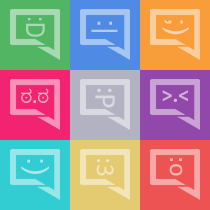
<style>
.page{position:relative;width:210px;height:210px}
.page>*{position:absolute;margin:0}
.t1{font:27px "Mangal";color:#b5caf2;scale:1.07 1}
.t2{font:27px "Mangal";color:#fcd2af;scale:1.07 1}
.t3{font:18.7px "Tunga";color:#f9aac1}
.t4{font:18.7px "Calibri-Bold";color:#f9aac1}
.t5{font:21.7px "Calibri-Bold";color:#cdb3d8}
.t6{font:30.3px "ArialMT";color:#ade7ea}
.t7{font:25.8px "Calibri";color:#f2e6c1}
.t8{font:25.8px "Calibri";color:#f7b6b6}
</style>
<div class="page">
<p class="t1" style="left:91px;top:21px;width:27px;height:11px;rotate:90deg">:|</p>
<p class="t2" style="left:162px;top:20px;width:27px;height:15px;rotate:90deg">;)</p>
<p class="t3" style="left:21px;top:88px;width:28px;height:15px">ಠ<span class="t4">.</span>ಠ</p>
<p class="t5" style="left:162px;top:90px;width:26px;height:12px">&gt;.&lt;</p>
<p class="t6" style="left:21px;top:159px;width:28px;height:15px;rotate:90deg">:)</p>
<p class="t7" style="left:96px;top:159px;width:18px;height:17px;rotate:90deg">:3</p>
<p class="t8" style="left:169px;top:158px;width:14px;height:18px;rotate:90deg">:o</p>
</div>
